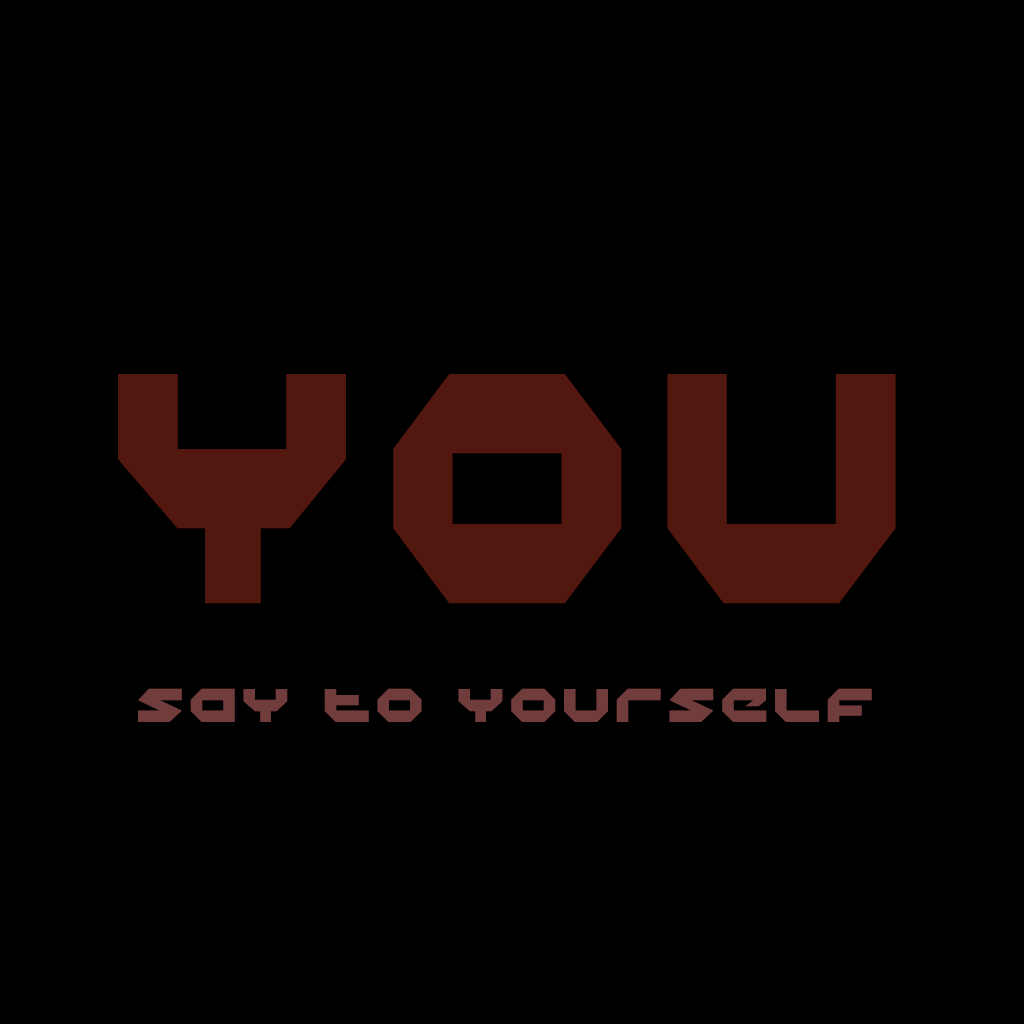
<style>
.page{position:relative;width:1024px;height:1024px;background:#000000}
.page>*{position:absolute;margin:0}
.t1{font:500.1px "HaloCondensed";color:#52170f}
.t2{font:72px "Halo";color:#703c3c}
</style>
<div class="page">
<p class="t1" style="left:118px;top:374px;width:778px;height:230px">YOU</p>
<p class="t2" style="left:138px;top:688px;width:734px;height:34px">say to yourself</p>
</div>
